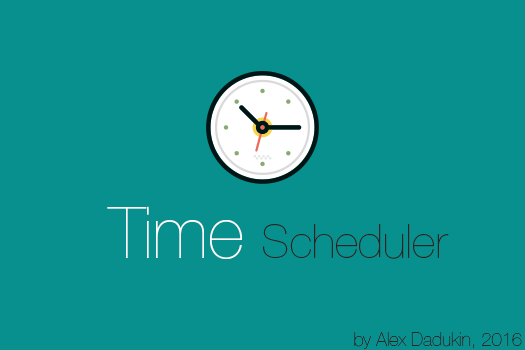
<style>
.page{position:relative;width:525px;height:350px;background:#07908e}
.page>*{position:absolute;margin:0}
.t1{font:46.2px "HelveticaNeueCyr-UltraLight";color:#252525}
.t2{font:71.8px "HelveticaNeueCyr-UltraLight";color:#ffffff}
.t3{font:18.5px "HelveticaNeueCyr-UltraLight";color:#252525}
</style>
<div class="page">
<p class="t1" style="left:107px;top:206px;width:342px;height:53px"><span class="t2">Time </span>Scheduler</p>
<p class="t3" style="left:354px;top:332px;width:168px;height:17px">by Alex Dadukin, 2016</p>
</div>
